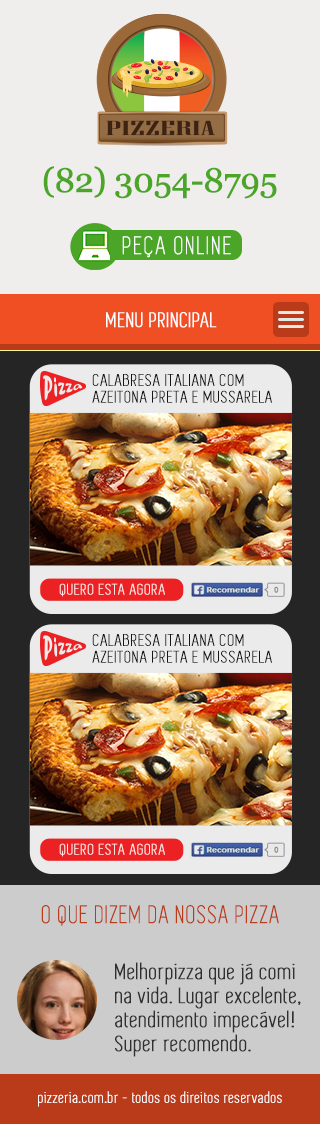
<style>
.page{position:relative;width:320px;height:1124px;background:#f0eded}
.page>*{position:absolute;margin:0}
.t1{font:34px "Georgia";letter-spacing:-0.03em;color:#4ba628;font-weight:bold}
.t2{font:26px "Simplifica";letter-spacing:0.06em;color:#ffffff;font-weight:bold}
.t3{font:22px "Simplifica";letter-spacing:0.032em;color:#fefefe;font-weight:bold}
.t4{font:17.3px/16.6px "Simplifica";letter-spacing:0.03em;color:#161616;font-weight:bold;scale:1.08 1}
.t5{font:15.9px "Simplifica";letter-spacing:0.036em;color:#fce6e6;font-weight:bold;scale:1.08 1}
.t6{font:26px "Simplifica";letter-spacing:0.03em;color:#ba3b1a;font-weight:bold}
.t7{font:23px/24px "Simplifica";letter-spacing:0.03em;color:#303030;font-weight:bold}
.t8{font:16px "Simplifica";letter-spacing:0.03em;color:#ffffff;font-weight:bold}
</style>
<div class="page">
<p class="t1" style="left:43px;top:166px;width:234px;height:33px">(82) 3054-8795</p>
<p class="t2" style="left:122px;top:236px;width:109px;height:22px">PEÇA ONLINE</p>
<p class="t3" style="left:106px;top:312px;width:111px;height:16px">MENU PRINCIPAL</p>
<p class="t4" style="left:92px;top:374px;width:180px;height:29px">CALABRESA ITALIANA COM <br>AZEITONA PRETA E MUSSARELA</p>
<p class="t5" style="left:59px;top:583px;width:106px;height:14px">QUERO ESTA AGORA</p>
<p class="t4" style="left:92px;top:634px;width:180px;height:29px">CALABRESA ITALIANA COM <br>AZEITONA PRETA E MUSSARELA</p>
<p class="t5" style="left:59px;top:843px;width:106px;height:14px">QUERO ESTA AGORA</p>
<p class="t6" style="left:41px;top:905px;width:238px;height:21px">O QUE DIZEM DA NOSSA PIZZA</p>
<p class="t7" style="left:115px;top:962px;width:186px;height:95px">Melhorpizza que já comi<br>na vida. Lugar excelente,<br>atendimento impecável!<br>Super recomendo.</p>
<p class="t8" style="left:38px;top:1091px;width:244px;height:16px">pizzeria.com.br - todos os direitos reservados</p>
</div>
